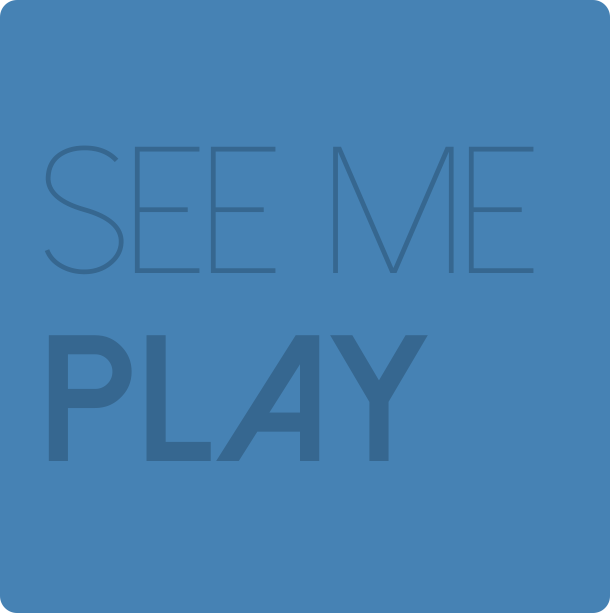
<style>
.page{position:relative;width:610px;height:613px;background:#4682b4}
.page>*{position:absolute;margin:0}
.t1{font:180px "DolceVitaLight";color:#366790}
.t2{font:180px "DolceVitaHeavy-Bold";color:#366790}
</style>
<div class="page">
<p class="t1" style="left:44px;top:145px;width:490px;height:130px">See me</p>
<p class="t2" style="left:48px;top:335px;width:380px;height:126px">PLAY</p>
</div>
